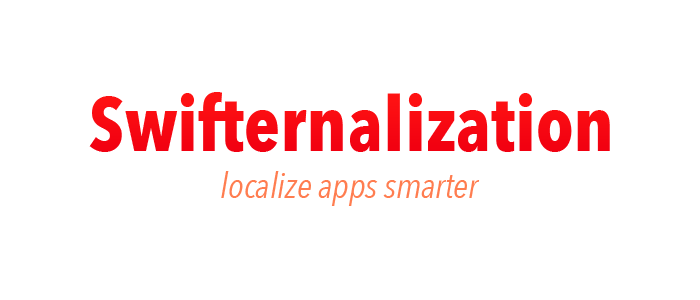
<style>
.page{position:relative;width:700px;height:300px;background:#ffffff}
.page>*{position:absolute;margin:0}
.t1{font:76.2px "AvenirNextCondensed-Bold";color:#f60712}
.t2{font:35.6px "AvenirNextCondensed-Italic";color:#ff7849}
</style>
<div class="page">
<p class="t1" style="left:89px;top:92px;width:521px;height:60px">Swifternalization</p>
<p class="t2" style="left:221px;top:171px;width:259px;height:35px">localize apps smarter</p>
</div>
